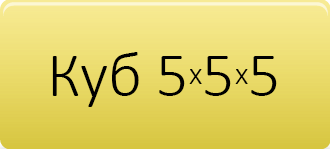
<style>
.page{position:relative;width:330px;height:149px}
.page>*{position:absolute;margin:0}
.t1{font:64px "Calibri-Light";color:#000000}
.t2{font:32px "Calibri-Light";color:#000000}
</style>
<div class="page">
<p class="t1" style="left:52px;top:52px;width:225px;height:55px">Куб 5<span class="t2">x</span>5<span class="t2">x</span>5</p>
</div>
